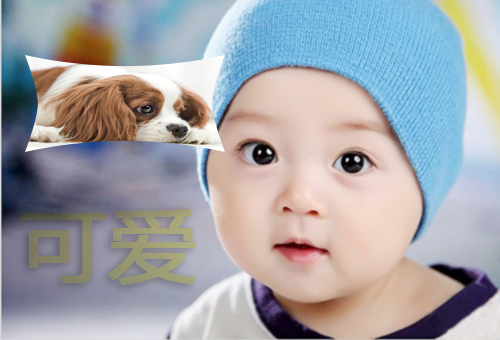
<style>
.page{position:relative;width:500px;height:340px}
.page>*{position:absolute;margin:0}
.t1{font:80px "MicrosoftYaHei";color:#969470;font-weight:bold;scale:1.09 1}
</style>
<div class="page">
<p class="t1" style="left:19px;top:209px;width:177px;height:76px">可爱</p>
</div>
